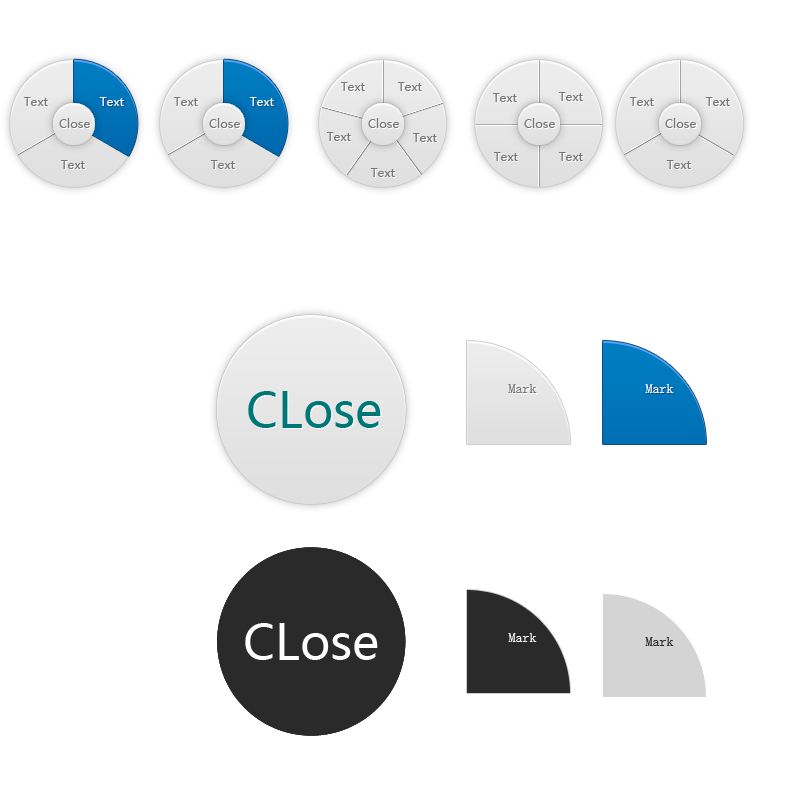
<style>
.page{position:relative;width:800px;height:800px;background:#ffffff}
.page>*{position:absolute;margin:0}
.t1{font:12px "MicrosoftYaHei";color:#777777}
.t2{font:12px "MicrosoftYaHei";color:#ffffff}
.t3{font:14px "SimSun";color:#777777}
.t4{font:14px "SimSun";color:#ffffff}
.t5{font:48px "MicrosoftYaHei";color:#007777}
.t6{font:48px "MicrosoftYaHei";color:#ffffff}
.t7{font:14px "SimSun";color:#2a2a2a}
</style>
<div class="page">
<p class="t1" style="left:340px;top:82px;width:25px;height:9px">Text</p>
<p class="t1" style="left:397px;top:82px;width:25px;height:9px">Text</p>
<p class="t1" style="left:23px;top:97px;width:25px;height:9px">Text</p>
<p class="t2" style="left:99px;top:97px;width:25px;height:9px">Text</p>
<p class="t1" style="left:173px;top:97px;width:25px;height:9px">Text</p>
<p class="t2" style="left:249px;top:97px;width:25px;height:9px">Text</p>
<p class="t1" style="left:492px;top:93px;width:25px;height:9px">Text</p>
<p class="t1" style="left:558px;top:92px;width:25px;height:9px">Text</p>
<p class="t1" style="left:629px;top:97px;width:25px;height:9px">Text</p>
<p class="t1" style="left:705px;top:97px;width:25px;height:9px">Text</p>
<p class="t1" style="left:59px;top:118px;width:31px;height:10px">Close</p>
<p class="t1" style="left:209px;top:118px;width:31px;height:10px">Close</p>
<p class="t1" style="left:368px;top:118px;width:31px;height:10px">Close</p>
<p class="t1" style="left:524px;top:118px;width:31px;height:10px">Close</p>
<p class="t1" style="left:665px;top:118px;width:31px;height:10px">Close</p>
<p class="t1" style="left:326px;top:132px;width:25px;height:9px">Text</p>
<p class="t1" style="left:412px;top:133px;width:25px;height:9px">Text</p>
<p class="t1" style="left:60px;top:160px;width:25px;height:9px">Text</p>
<p class="t1" style="left:210px;top:160px;width:25px;height:9px">Text</p>
<p class="t1" style="left:493px;top:152px;width:25px;height:9px">Text</p>
<p class="t1" style="left:558px;top:152px;width:25px;height:9px">Text</p>
<p class="t1" style="left:666px;top:160px;width:25px;height:9px">Text</p>
<p class="t1" style="left:370px;top:168px;width:25px;height:9px">Text</p>
<p class="t3" style="left:508px;top:384px;width:29px;height:9px">Mark</p>
<p class="t4" style="left:645px;top:384px;width:29px;height:9px">Mark</p>
<p class="t5" style="left:248px;top:391px;width:133px;height:37px">CLose</p>
<p class="t6" style="left:245px;top:623px;width:133px;height:37px">CLose</p>
<p class="t4" style="left:508px;top:633px;width:29px;height:9px">Mark</p>
<p class="t7" style="left:645px;top:637px;width:29px;height:9px">Mark</p>
</div>
